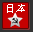
<style>
.page{position:relative;width:33px;height:32px;background:#c50000}
.page>*{position:absolute;margin:0}
.t1{font:10.4px "SimSun";color:#ffffff}
</style>
<div class="page">
<p class="t1" style="left:7px;top:4px;width:18px;height:9px">日本</p>
</div>
